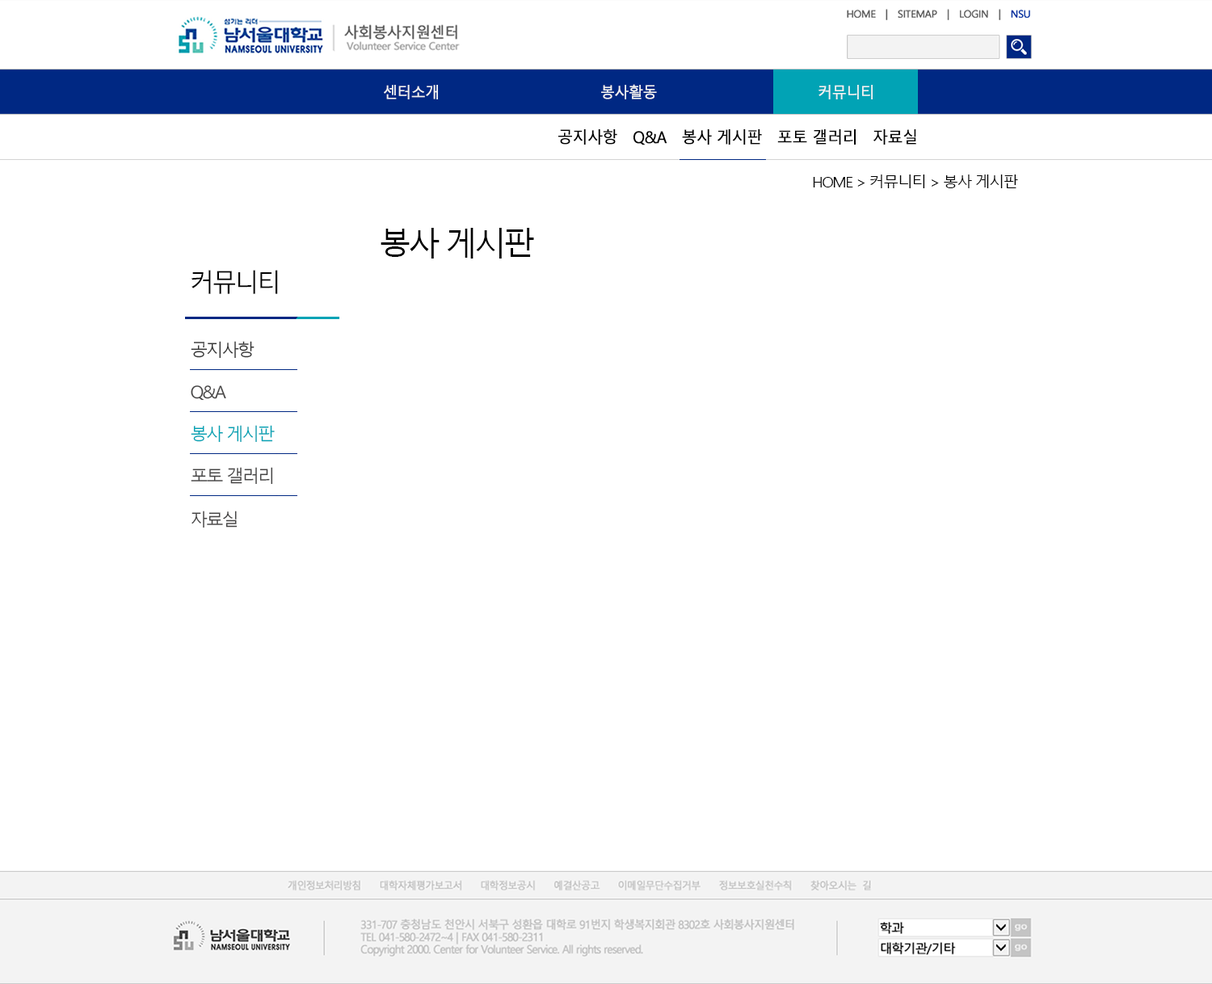
<style>
.page{position:relative;width:1212px;height:984px;background:#ffffff}
.page>*{position:absolute;margin:0}
.t1{font:15.1px "MalgunGothicRegular";letter-spacing:-0.05em;color:#f3f3f3;font-weight:bold;scale:0.95 1}
.t2{font:16.2px "MalgunGothicRegular";letter-spacing:-0.05em;color:#000000;font-weight:bold;scale:0.95 1}
.t3{font:14.9px "MalgunGothicRegular";letter-spacing:-0.1em;color:#000000;scale:1.05 1}
.t4{font:32.3px "MalgunGothicRegular";letter-spacing:-0.1em;color:#000000}
.t5{font:25.1px "MalgunGothicRegular";letter-spacing:-0.1em;color:#000000}
.t6{font:17.4px "MalgunGothicRegular";letter-spacing:-0.1em;color:#363636}
.t7{font:17.4px "MalgunGothicRegular";letter-spacing:-0.1em;color:#454444}
.t8{font:17.4px "MalgunGothicRegular";letter-spacing:-0.1em;color:#01a3b5}
</style>
<div class="page">
<p class="t1" style="left:384px;top:84px;width:489px;height:15px">센터소개        봉사활동       커뮤니티</p>
<p class="t2" style="left:558px;top:129px;width:358px;height:16px">공지사항　Q&amp;A　봉사 게시판　포토 갤러리　자료실</p>
<p class="t3" style="left:813px;top:175px;width:205px;height:13px">HOME &gt; 커뮤니티 &gt; 봉사 게시판</p>
<p class="t4" style="left:381px;top:228px;width:153px;height:31px">봉사 게시판</p>
<p class="t5" style="left:191px;top:270px;width:87px;height:24px">커뮤니티</p>
<p class="t6" style="left:191px;top:341px;width:63px;height:18px">공지사항</p>
<p class="t7" style="left:191px;top:385px;width:35px;height:16px">Q&amp;A</p>
<p class="t8" style="left:191px;top:425px;width:84px;height:18px">봉사 게시판</p>
<p class="t7" style="left:191px;top:467px;width:82px;height:18px">포토 갤러리</p>
<p class="t7" style="left:191px;top:511px;width:47px;height:17px">자료실</p>
</div>
